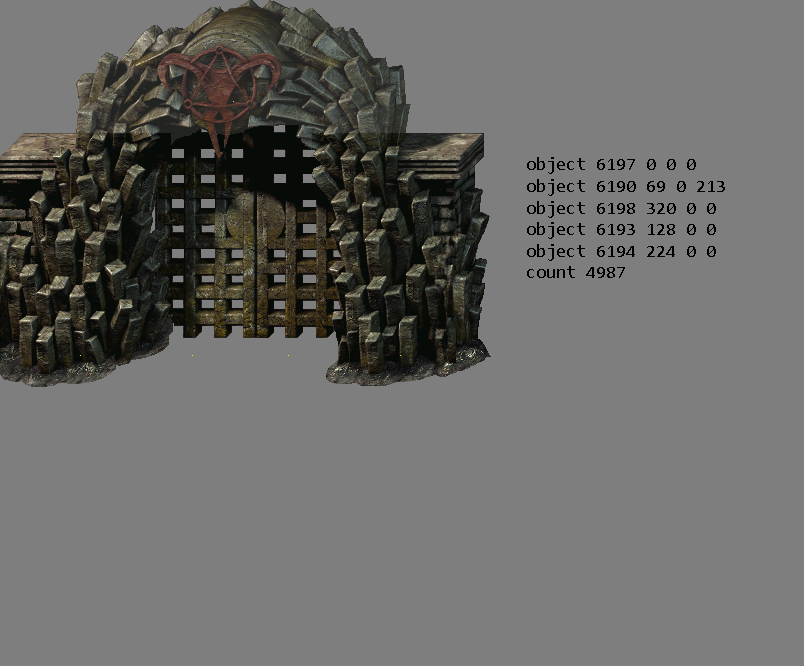
<style>
.page{position:relative;width:804px;height:666px;background:#7e7e7e}
.page>*{position:absolute;margin:0}
.t1{font:18px "Consolas";color:#000000}
</style>
<div class="page">
<p class="t1" style="left:527px;top:157px;width:198px;height:121px">object 6197 0 0 0<br>object 6190 69 0 213<br>object 6198 320 0 0<br>object 6193 128 0 0<br>object 6194 224 0 0<br>count 4987</p>
</div>
